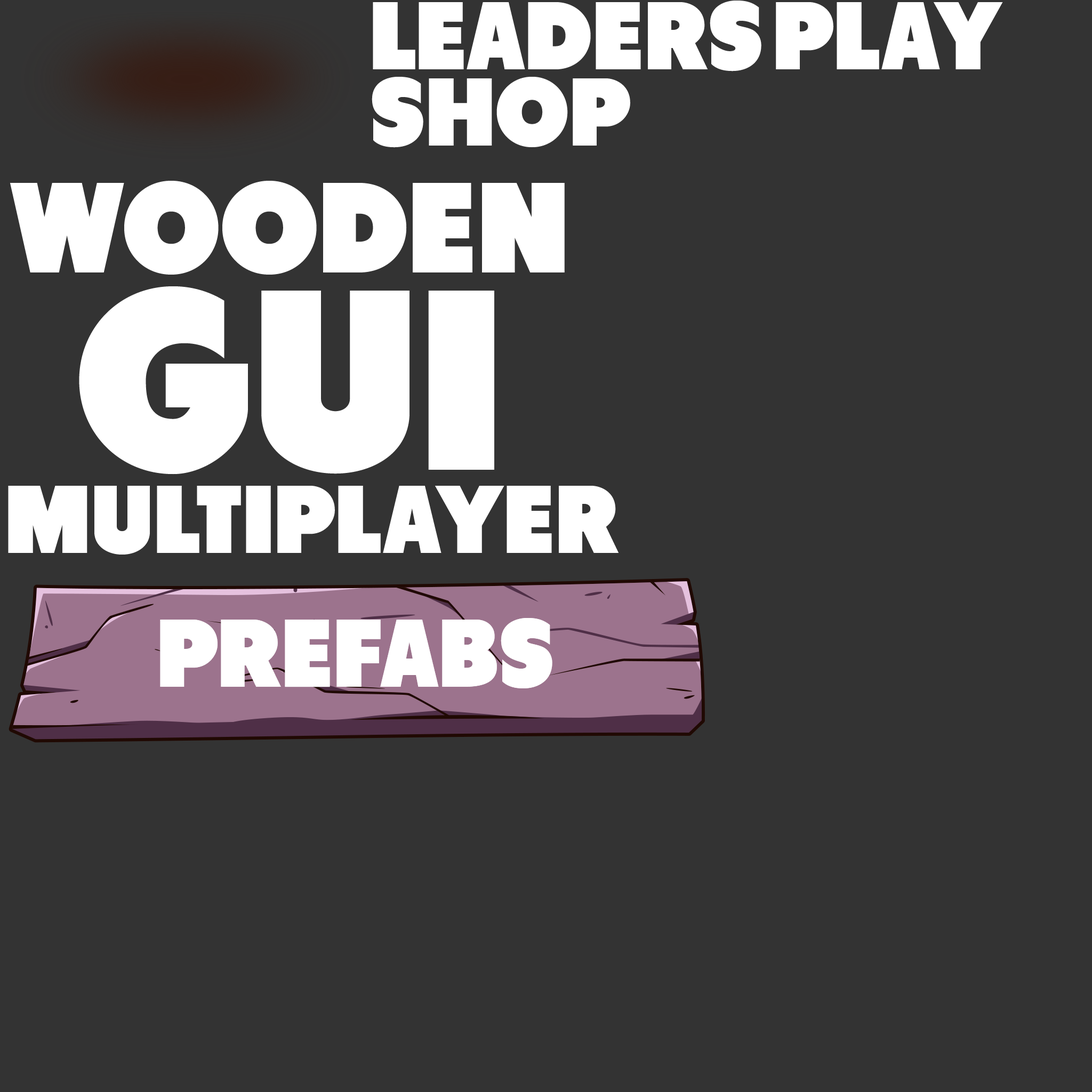
<style>
.page{position:relative;width:1092px;height:1092px;background:#333333}
.page>*{position:absolute;margin:0}
.t1{font:96px "Tondu-Beta";color:#ffffff;text-transform:uppercase}
.t2{font:128px/128px "Tondu-Beta";color:#ffffff;text-transform:uppercase}
.t3{font:255.9px/197.3px "Tondu-Beta";color:#ffffff;text-transform:uppercase}
</style>
<div class="page">
<p class="t1" style="left:373px;top:1px;width:388px;height:70px">leaders</p>
<p class="t1" style="left:776px;top:2px;width:227px;height:67px">play</p>
<p class="t1" style="left:372px;top:77px;width:258px;height:71px">shop</p>
<p class="t2" style="left:10px;top:181px;width:555px;height:294px;text-align:center">Wooden<br><span class="t3">GUI</span></p>
<p class="t1" style="left:8px;top:486px;width:611px;height:69px">multiplayer</p>
<p class="t1" style="left:160px;top:618px;width:392px;height:70px">prefabs</p>
</div>
